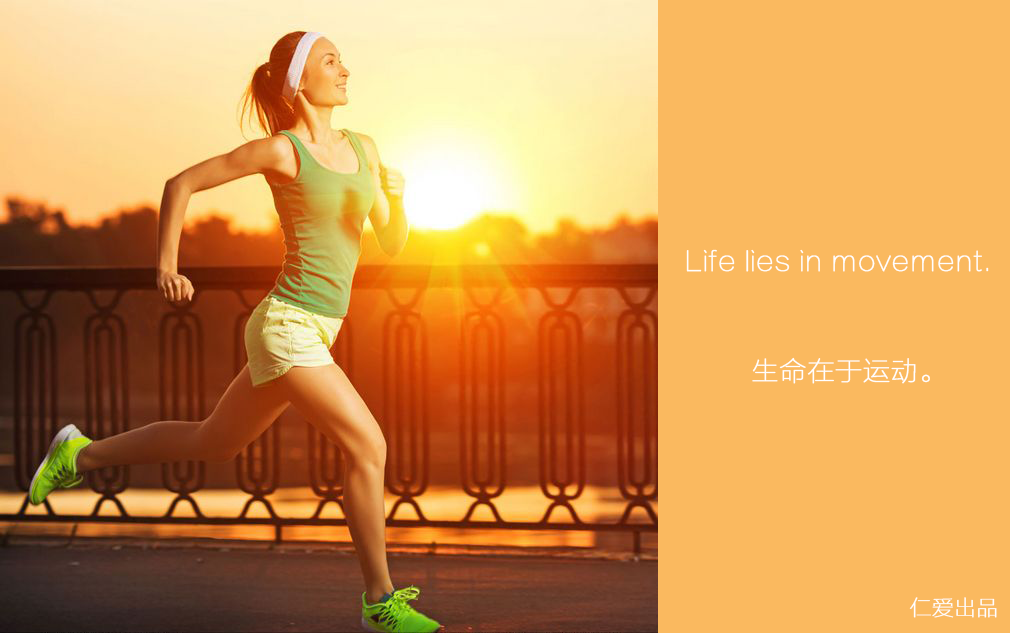
<style>
.page{position:relative;width:1010px;height:633px;background:#fab95f}
.page>*{position:absolute;margin:0}
.t1{font:27.1px "FZLTCXHJW--GB1-0";color:#ffffff;font-weight:bold}
.t2{font:21.7px "FZLTCXHJW--GB1-0";color:#ffffff;font-weight:bold}
</style>
<div class="page">
<p class="t1" style="left:686px;top:249px;width:303px;height:23px">Life lies in movement.</p>
<p class="t1" style="left:752px;top:357px;width:178px;height:27px">生命在于运动。</p>
<p class="t2" style="left:909px;top:597px;width:88px;height:21px">仁爱出品</p>
</div>
